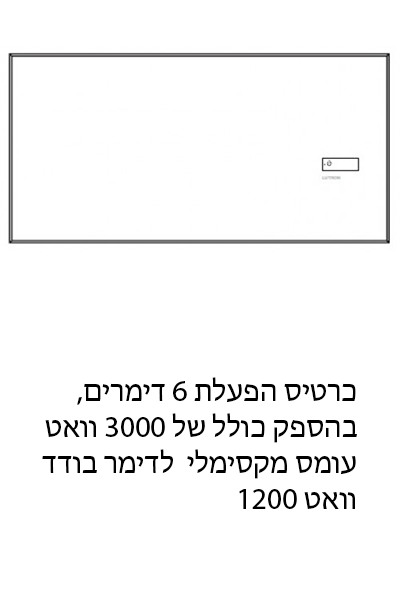
<style>
.page{position:relative;width:400px;height:600px;background:#ffffff}
.page>*{position:absolute;margin:0}
.t1{font:30px "MyriadHebrew-Regular";color:#000000}
</style>
<div class="page">
<p class="t1" style="left:42px;top:377px;width:315px;height:132px;text-align:right">,כרטיס הפעלת 6 דימרים<br> בהספק כולל של 3000 וואט<br>עומס מקסימלי  לדימר בודד<br>  1200 וואט</p>
</div>
